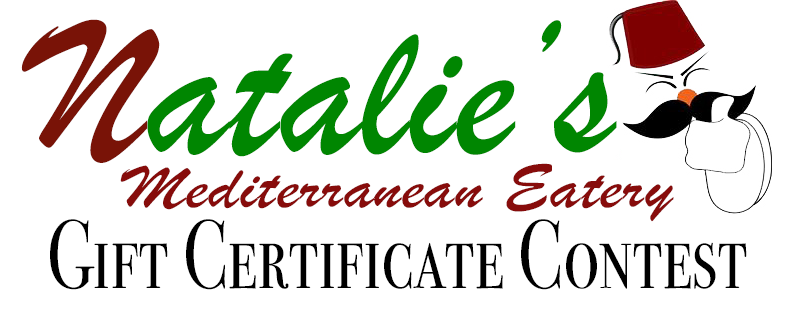
<style>
.page{position:relative;width:795px;height:312px;background:#ffffff}
.page>*{position:absolute;margin:0}
.t1{font:200px "BrushScriptMT";letter-spacing:0.01em;color:#008601}
.t2{font:200px "BrushScriptMT";letter-spacing:0.01em;color:#791307}
.t3{font:64px "BrushScriptMT";letter-spacing:0.01em;color:#870c0b;scale:1.15 1}
.t4{font:97.5px "BodoniSvtyTwoSCITCTT-Book";letter-spacing:0.01em;color:#000000;scale:0.71 1}
</style>
<div class="page">
<p class="t1" style="left:21px;top:19px;width:596px;height:144px"><span class="t2">N</span>atalie’s</p>
<p class="t3" style="left:120px;top:163px;width:554px;height:59px">Mediterranean Eatery</p>
<p class="t4" style="left:50px;top:219px;width:697px;height:71px">Gift Certificate Contest</p>
</div>
